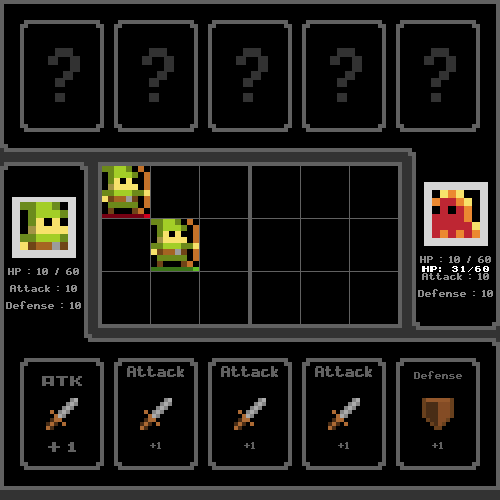
<style>
.page{position:relative;width:500px;height:500px;background:#000000}
.page>*{position:absolute;margin:0}
.t1{font:60px "pixelmix";color:#323232;font-weight:bold}
.t2{font:8px "pixelmix";color:#8c8c8c;font-weight:bold}
.t3{font:12px "pixelmix";color:#616161;font-weight:bold}
.t4{font:8px "pixelmix";color:#616161;font-weight:bold}
</style>
<div class="page">
<p class="t1" style="left:48px;top:48px;width:32px;height:54px">?</p>
<p class="t1" style="left:142px;top:48px;width:32px;height:54px">?</p>
<p class="t1" style="left:236px;top:48px;width:32px;height:54px">?</p>
<p class="t1" style="left:330px;top:48px;width:32px;height:54px">?</p>
<p class="t1" style="left:424px;top:48px;width:32px;height:54px">?</p>
<p class="t2" style="left:420px;top:256px;width:71px;height:7px">HP : 10 / 60</p>
<p class="t2" style="left:8px;top:268px;width:71px;height:7px">HP : 10 / 60</p>
<p class="t2" style="left:422px;top:273px;width:67px;height:7px">Attack : 10</p>
<p class="t2" style="left:10px;top:285px;width:67px;height:7px">Attack : 10</p>
<p class="t2" style="left:418px;top:289px;width:75px;height:8px">Defense : 10</p>
<p class="t2" style="left:6px;top:301px;width:75px;height:8px">Defense : 10</p>
<p class="t3" style="left:127px;top:366px;width:57px;height:11px">Attack</p>
<p class="t3" style="left:221px;top:366px;width:57px;height:11px">Attack</p>
<p class="t3" style="left:315px;top:366px;width:57px;height:11px">Attack</p>
<p class="t4" style="left:414px;top:371px;width:48px;height:8px">Defense</p>
<p class="t4" style="left:150px;top:442px;width:11px;height:7px">+1</p>
<p class="t4" style="left:244px;top:442px;width:11px;height:7px">+1</p>
<p class="t4" style="left:338px;top:442px;width:11px;height:7px">+1</p>
<p class="t4" style="left:432px;top:442px;width:11px;height:7px">+1</p>
</div>
